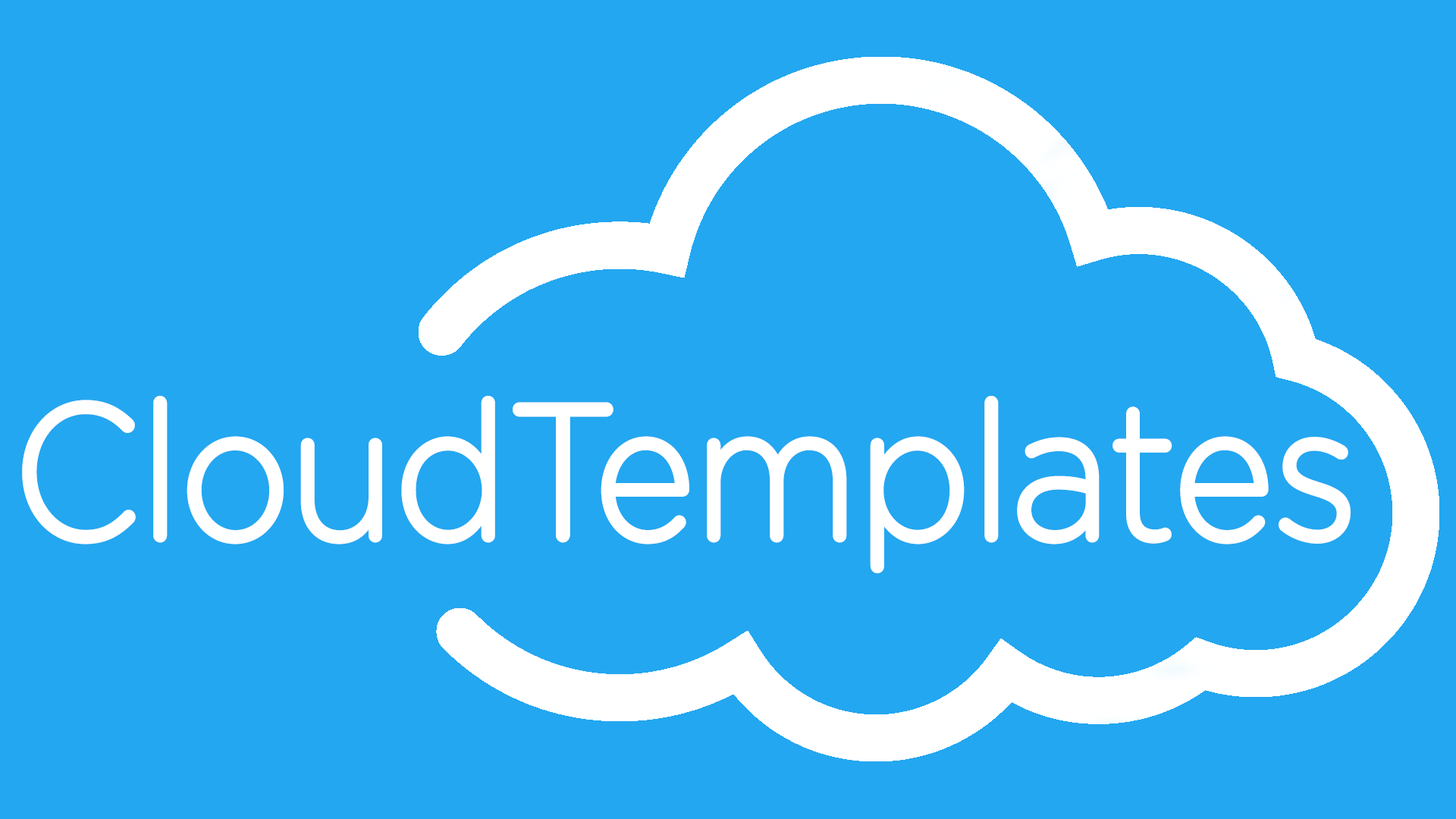
<style>
.page{position:relative;width:1456px;height:819px;background:#23a7f0}
.page>*{position:absolute;margin:0}
.t1{font:191.9px "GothamRounded-Light";letter-spacing:-0.04em;color:#ffffff;font-weight:bold;scale:0.91 1}
</style>
<div class="page">
<p class="t1" style="left:22px;top:396px;width:1329px;height:177px">CloudTemplates</p>
</div>
